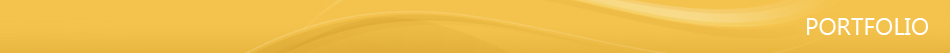
<style>
.page{position:relative;width:950px;height:53px}
.page>*{position:absolute;margin:0}
.t1{font:24px "SegoeUI";color:#ffffff}
</style>
<div class="page">
<p class="t1" style="left:807px;top:18px;width:122px;height:17px">PORTFOLIO</p>
</div>
